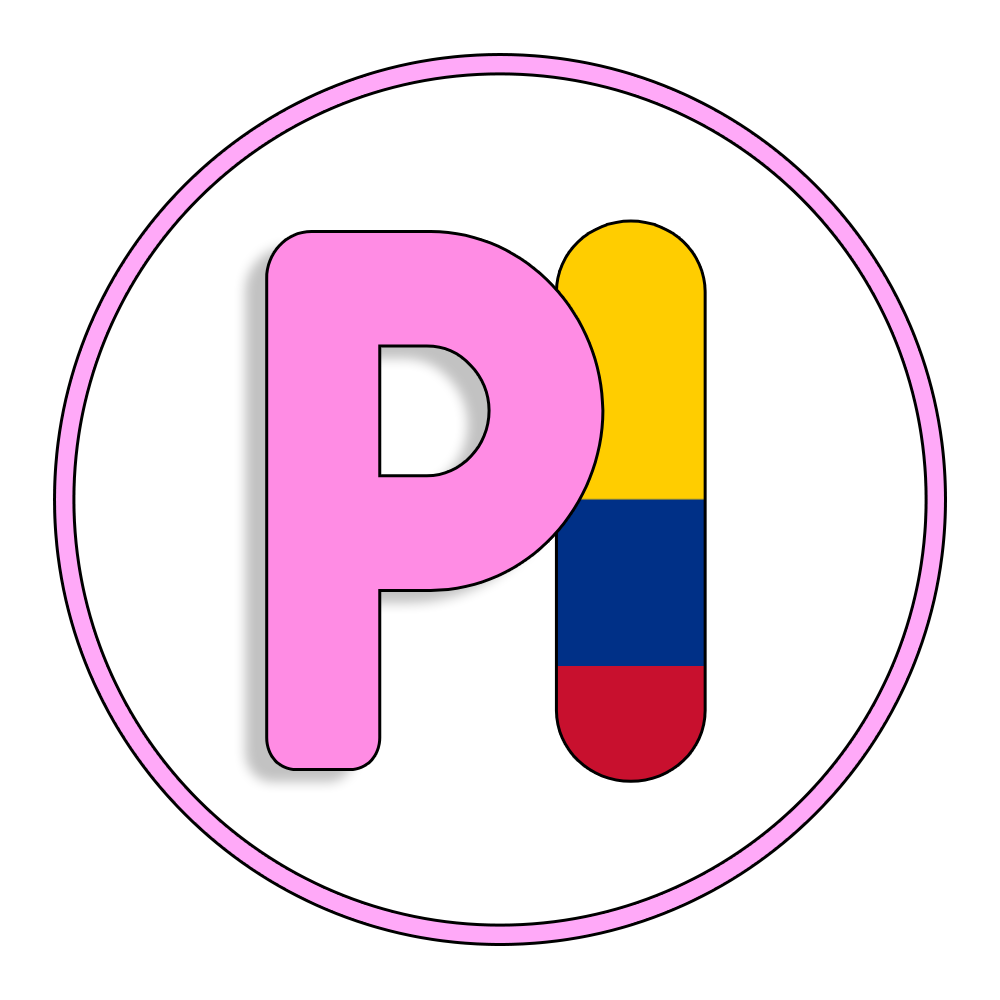
<style>
.page{position:relative;width:1000px;height:1000px;background:#ffffff}
.page>*{position:absolute;margin:0}
.t1{font:759px "Fulbo-Argenta";color:#ff8ce4}
</style>
<div class="page">
<p class="t1" style="left:268px;top:233px;width:334px;height:535px">P</p>
</div>
